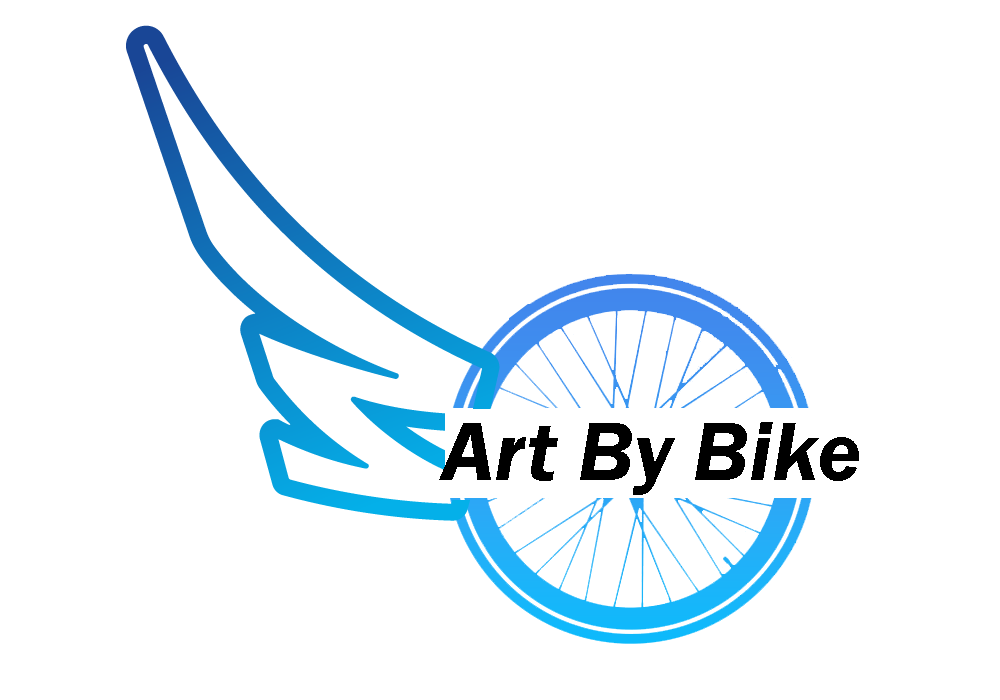
<style>
.page{position:relative;width:1000px;height:700px;background:#ffffff}
.page>*{position:absolute;margin:0}
.t1{font:85px "FranklinGothic-DemiItalic";color:#000000}
</style>
<div class="page">
<p class="t1" style="left:439px;top:422px;width:420px;height:73px">Art By Bike</p>
</div>
